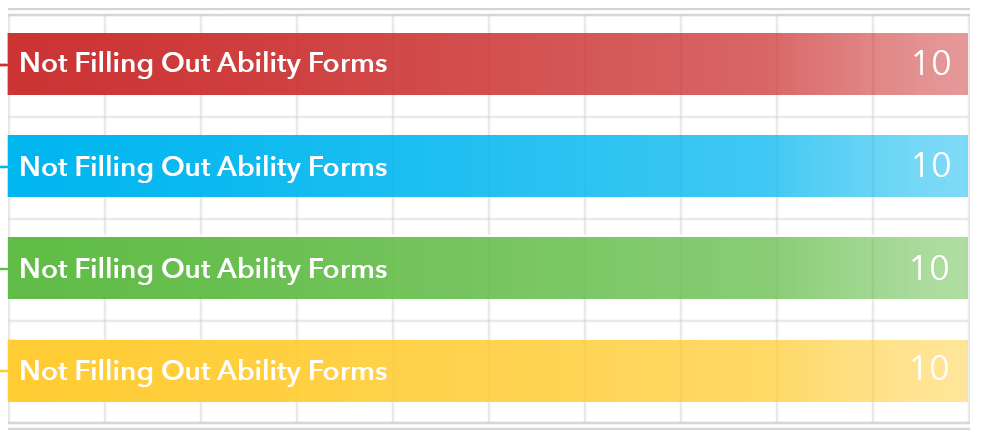
<style>
.page{position:relative;width:982px;height:442px;background:#ffffff}
.page>*{position:absolute;margin:0}
.t1{font:28px "AvenirNext-DemiBold";color:#ffffff}
.t2{font:36px "AvenirNext-Regular";color:#ffffff}
</style>
<div class="page">
<p class="t1" style="left:21px;top:51px;width:366px;height:28px">Not Filling Out Ability Forms</p>
<p class="t2" style="left:914px;top:50px;width:36px;height:25px">10</p>
<p class="t1" style="left:21px;top:155px;width:366px;height:28px">Not Filling Out Ability Forms</p>
<p class="t2" style="left:914px;top:152px;width:36px;height:25px">10</p>
<p class="t1" style="left:21px;top:257px;width:366px;height:28px">Not Filling Out Ability Forms</p>
<p class="t2" style="left:912px;top:255px;width:36px;height:25px">10</p>
<p class="t1" style="left:21px;top:359px;width:366px;height:28px">Not Filling Out Ability Forms</p>
<p class="t2" style="left:912px;top:355px;width:36px;height:25px">10</p>
</div>
